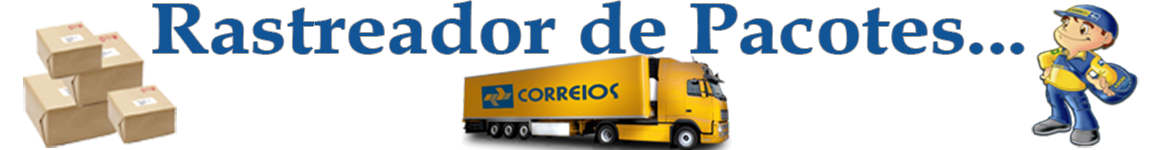
<style>
.page{position:relative;width:1149px;height:150px;background:#ffffff}
.page>*{position:absolute;margin:0}
.t1{font:72.1px "BookAntiqua-Bold";color:#115597;scale:1.14 1}
</style>
<div class="page">
<p class="t1" style="left:153px;top:1px;width:871px;height:53px">Rastreador de Pacotes...</p>
</div>
